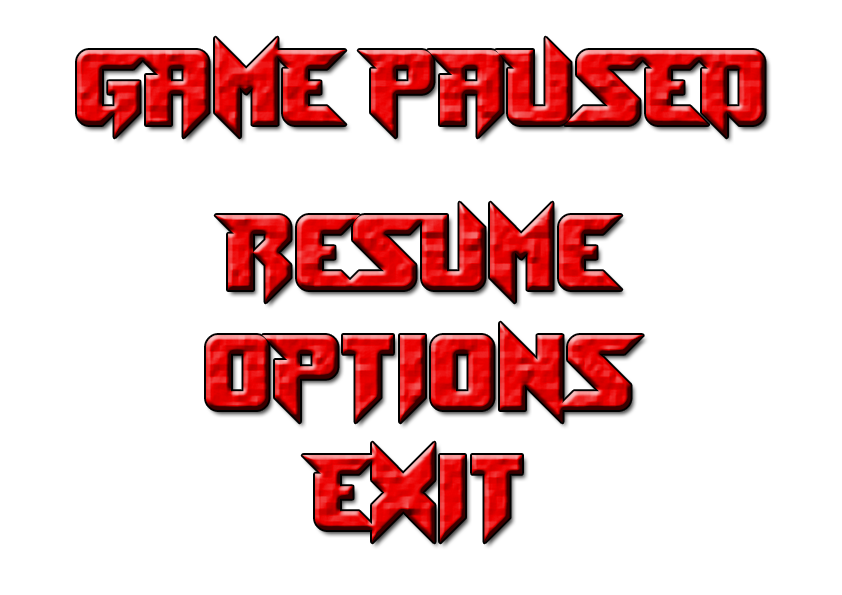
<style>
.page{position:relative;width:842px;height:595px;background:#ffffff}
.page>*{position:absolute;margin:0}
.t1{font:100px "Toe-the-Lineless"}
</style>
<div class="page">
<p class="t1" style="left:77px;top:37px;width:688px;height:101px">GAME PAUSED</p>
<p class="t1" style="left:206px;top:202px;width:437px;height:341px;text-align:center">Resume<br>Options<br>Exit</p>
</div>
